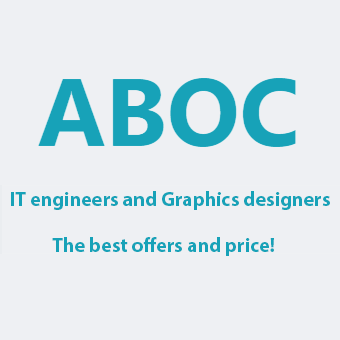
<style>
.page{position:relative;width:340px;height:340px;background:#eef0f3}
.page>*{position:absolute;margin:0}
.t1{font:20px "MyriadPro-Bold";color:#17a2b8}
</style>
<div class="page">
<p class="t1" style="left:11px;top:191px;width:319px;height:19px">IT engineers and Graphics designers</p>
<p class="t1" style="left:52px;top:237px;width:222px;height:19px">The best offers and price!</p>
</div>
